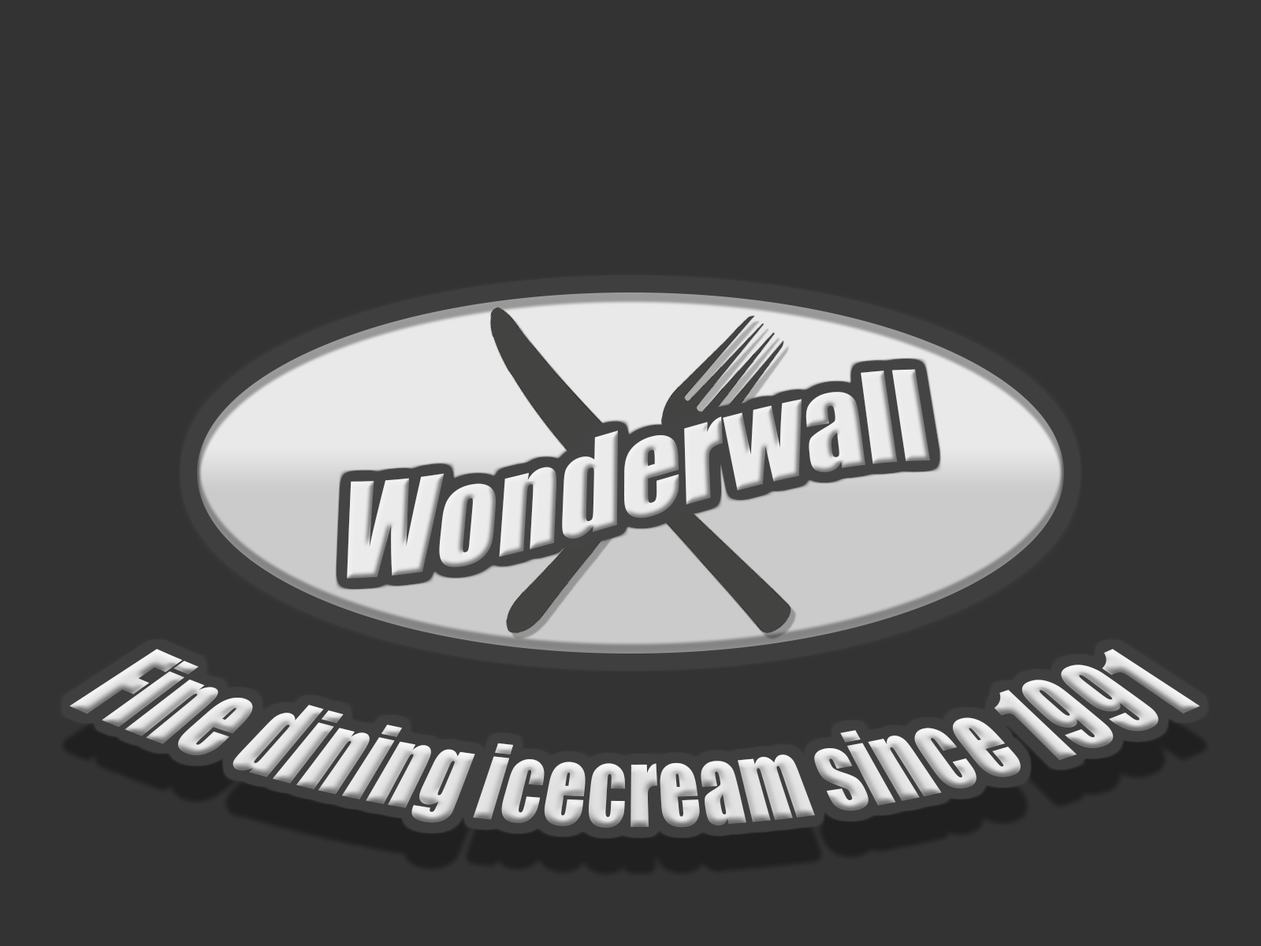
<style>
.page{position:relative;width:1261px;height:946px;background:#333333}
.page>*{position:absolute;margin:0}
.t1{font:78.8px "Impact";color:#e0e0e0}
</style>
<div class="page">
<p class="t1" style="left:69px;top:649px;width:1131px;height:178px">Fine dining icecream since 1991</p>
</div>
